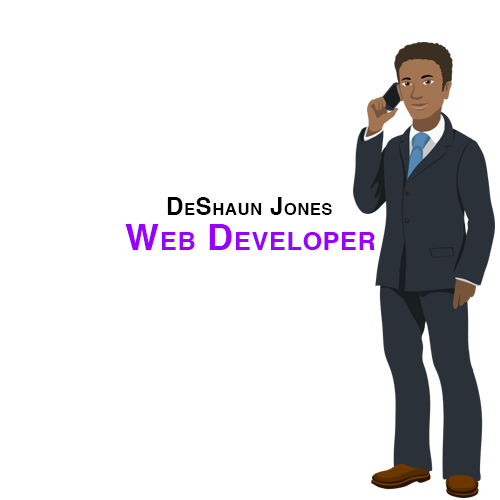
<style>
.page{position:relative;width:500px;height:500px;background:#ffffff}
.page>*{position:absolute;margin:0}
.t1{font:24px "Helvetica-Bold";letter-spacing:0.025em;color:#000000;font-variant:small-caps}
.t2{font:36px "Helvetica-Bold";letter-spacing:0.025em;color:#9900ff;font-variant:small-caps}
</style>
<div class="page">
<p class="t1" style="left:167px;top:197px;width:165px;height:18px">DeShaun Jones</p>
<p class="t2" style="left:125px;top:224px;width:250px;height:26px">Web Developer</p>
</div>
